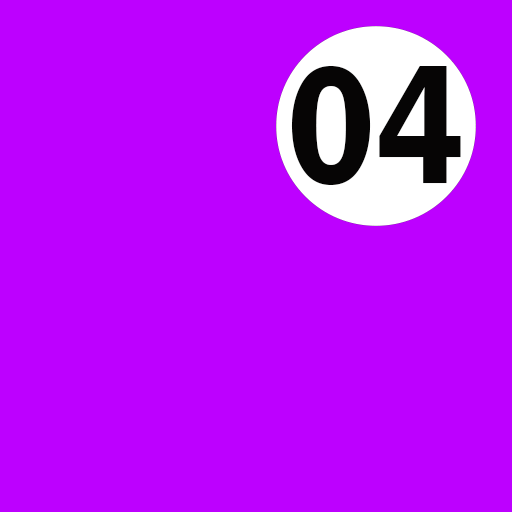
<style>
.page{position:relative;width:512px;height:512px;background:#bd00ff}
.page>*{position:absolute;margin:0}
.t1{font:172.5px "FranklinGothic-Demi";color:#060505;scale:0.87 1}
</style>
<div class="page">
<p class="t1" style="left:291px;top:66px;width:170px;height:119px">04</p>
</div>
